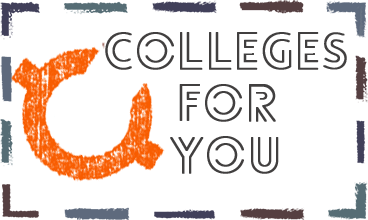
<style>
.page{position:relative;width:368px;height:220px;background:#ffffff}
.page>*{position:absolute;margin:0}
.t1{font:49px/52px "LoveloLineLight";color:#413f3f;font-weight:bold}
</style>
<div class="page">
<p class="t1" style="left:105px;top:32px;width:242px;height:142px;text-align:center">Colleges<br>For<br>You</p>
</div>
